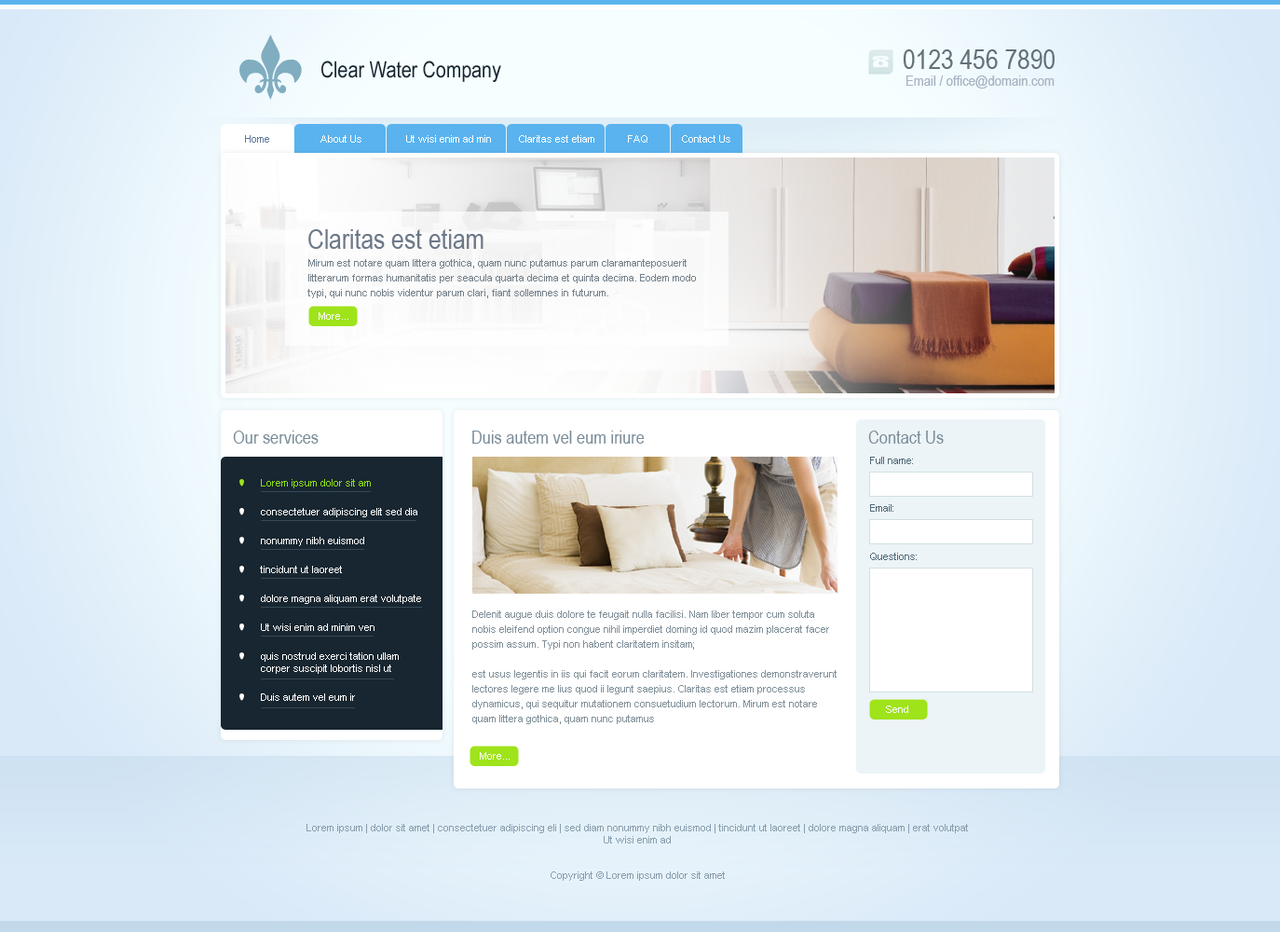
<style>
.page{position:relative;width:1280px;height:932px}
.page>*{position:absolute;margin:0}
.t1{font:27.9px "ArialNarrow";color:#647179}
.t2{font:22.4px "ArialNarrow";color:#172630}
.t3{font:14.9px "ArialNarrow";color:#a7b2c2}
.t4{font:10.2px "ArialMT";color:#617b9f}
.t5{font:10.2px "ArialMT";color:#ffffff}
.t6{font:27.9px "ArialNarrow";color:#6d7888}
.t7{font:10.2px/14.9px "ArialMT";color:#74808a}
.t8{font:10.2px "ArialMT";color:#fefefe}
.t9{font:18.6px "ArialNarrow";color:#7a8c98}
.t10{font:10.2px "ArialMT";color:#516a79}
.t11{font:10.2px "ArialMT";color:#8bde15}
.t12{font:10.2px/14.9px "ArialMT";color:#81909a}
.t13{font:10.2px "ArialMT";color:#899eae}
</style>
<div class="page">
<p class="t1" style="left:903px;top:49px;width:152px;height:20px">0123 456 7890</p>
<p class="t2" style="left:321px;top:61px;width:180px;height:21px">Clear Water Company</p>
<p class="t3" style="left:906px;top:75px;width:149px;height:14px">Email / office@domain.com</p>
<p class="t4" style="left:245px;top:135px;width:24px;height:8px">Home</p>
<p class="t5" style="left:320px;top:135px;width:41px;height:8px">About Us</p>
<p class="t5" style="left:406px;top:135px;width:85px;height:8px">Ut wisi enim ad min</p>
<p class="t5" style="left:519px;top:135px;width:75px;height:8px">Claritas est etiam</p>
<p class="t5" style="left:628px;top:135px;width:19px;height:8px">FAQ</p>
<p class="t5" style="left:682px;top:135px;width:48px;height:8px">Contact Us</p>
<p class="t6" style="left:308px;top:229px;width:175px;height:20px">Claritas est etiam</p>
<p class="t7" style="left:307px;top:259px;width:389px;height:39px">Mirum est notare quam littera gothica, quam nunc putamus parum claramanteposuerit litterarum formas humanitatis per seacula quarta decima et quinta decima. Eodem modo typi, qui nunc nobis videntur parum clari, fiant sollemnes in futurum.</p>
<p class="t8" style="left:319px;top:312px;width:29px;height:8px">More...</p>
<p class="t9" style="left:233px;top:430px;width:86px;height:13px">Our services</p>
<p class="t9" style="left:472px;top:430px;width:173px;height:13px">Duis autem vel eum iriure</p>
<p class="t9" style="left:868px;top:430px;width:76px;height:13px">Contact Us</p>
<p class="t10" style="left:870px;top:456px;width:43px;height:8px">Full name:</p>
<p class="t11" style="left:261px;top:479px;width:110px;height:9px">Lorem ipsum dolor sit am</p>
<p class="t5" style="left:261px;top:508px;width:156px;height:9px">consectetuer adipiscing elit sed diа</p>
<p class="t10" style="left:870px;top:504px;width:23px;height:7px">Email:</p>
<p class="t5" style="left:261px;top:537px;width:103px;height:9px">nonummy nibh euismod</p>
<p class="t10" style="left:870px;top:552px;width:47px;height:8px">Questions:</p>
<p class="t5" style="left:260px;top:565px;width:82px;height:8px">tincidunt ut laoreet</p>
<p class="t5" style="left:261px;top:594px;width:160px;height:10px">dolore magna aliquam erat volutpate</p>
<p class="t12" style="left:472px;top:610px;width:365px;height:114px">Delenit augue duis dolore te feugait nulla facilisi. Nam liber tempor cum soluta nobis eleifend option congue nihil imperdiet doming id quod mazim placerat facer possim assum. Typi non habent claritatem insitam;<br><br>est usus legentis in iis qui facit eorum claritatem. Investigationes demonstraverunt lectores legere me lius quod ii legunt saepius. Claritas est etiam processus dynamicus, qui sequitur mutationem consuetudium lectorum. Mirum est notare quam littera gothica, quam nunc putamus</p>
<p class="t5" style="left:261px;top:623px;width:113px;height:8px">Ut wisi enim ad minim ven</p>
<p class="t5" style="left:261px;top:652px;width:138px;height:22px">quis nostrud exerci tation ullam<br>corper suscipit lobortis nisl ut</p>
<p class="t5" style="left:261px;top:693px;width:94px;height:8px">Duis autem vel eum ir</p>
<p class="t8" style="left:886px;top:705px;width:22px;height:8px">Send</p>
<p class="t8" style="left:480px;top:752px;width:30px;height:7px">More...</p>
<p class="t13" style="left:306px;top:824px;width:662px;height:19px;text-align:center">Lorem ipsum | dolor sit amet | consectetuer adipiscing eli | sed diam nonummy nibh euismod | tincidunt ut laoreet | dolore magna aliquam | erat volutpat<br>Ut wisi enim ad</p>
<p class="t13" style="left:551px;top:871px;width:174px;height:9px">Copyright © Lorem ipsum dolor sit amet</p>
</div>
